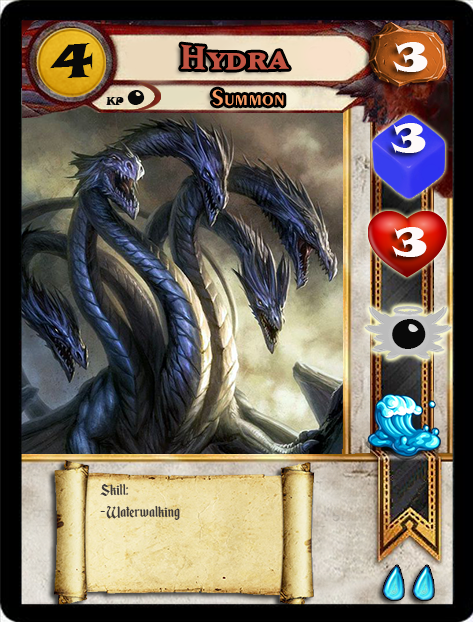
<style>
.page{position:relative;width:473px;height:622px}
.page>*{position:absolute;margin:0}
.t1{font:46.6px "SnapITC-Regular";color:#090909;scale:1.05 1}
.t2{font:40px "MatrixBoldSmallCaps";color:#c25443;scale:1.06 1}
.t3{font:40px "SnapITC-Regular";color:#fef9f9;scale:1.05 1}
.t4{font:22.7px "Exotic350BT-DemiBold";color:#f89c64;scale:1.06 1}
.t5{font:20.5px "SnapITC-Regular";color:#090909}
.t6{font:40px "SnapITC-Regular";color:#090909;scale:1.05 1}
.t7{font:18.7px "EnchantedLand";color:#3e3939}
</style>
<div class="page">
<p class="t1" style="left:50px;top:43px;width:43px;height:35px">4</p>
<p class="t2" style="left:181px;top:44px;width:108px;height:26px">Hydra</p>
<p class="t3" style="left:393px;top:42px;width:35px;height:30px">3</p>
<p class="t4" style="left:212px;top:89px;width:72px;height:17px">Summon</p>
<p class="t5" style="left:127px;top:90px;width:18px;height:15px">0</p>
<p class="t3" style="left:391px;top:123px;width:35px;height:30px">3</p>
<p class="t3" style="left:392px;top:227px;width:35px;height:30px">3</p>
<p class="t6" style="left:392px;top:319px;width:34px;height:30px">0</p>
<p class="t7" style="left:100px;top:483px;width:80px;height:37px">Skill:<br>- Waterwalking</p>
</div>
